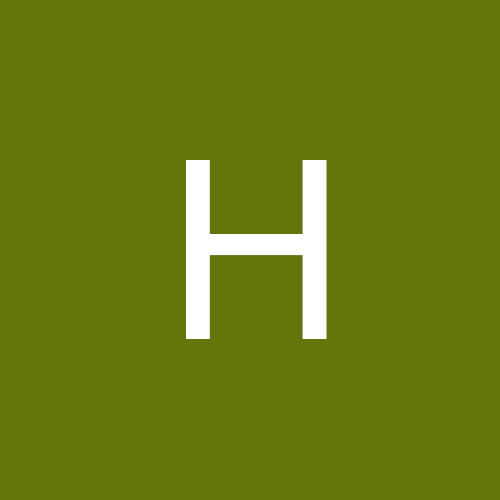
<style>
.page{position:relative;width:500px;height:500px;background:#62760c}
.page>*{position:absolute;margin:0}
.t1{font:250px "ArialMT";color:#ffffff}
</style>
<div class="page">
<p class="t1" style="left:186px;top:160px;width:141px;height:179px">H</p>
</div>
